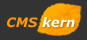
<style>
.page{position:relative;width:87px;height:40px;background:#333333}
.page>*{position:absolute;margin:0}
.t1{font:13.1px "Verdana-BoldItalic";color:#ff9900;text-transform:uppercase}
.t2{font:13.1px "Verdana-BoldItalic";color:#ffffff}
</style>
<div class="page">
<p class="t1" style="left:7px;top:17px;width:31px;height:11px">cms</p>
<p class="t2" style="left:42px;top:17px;width:33px;height:11px">kern</p>
</div>
